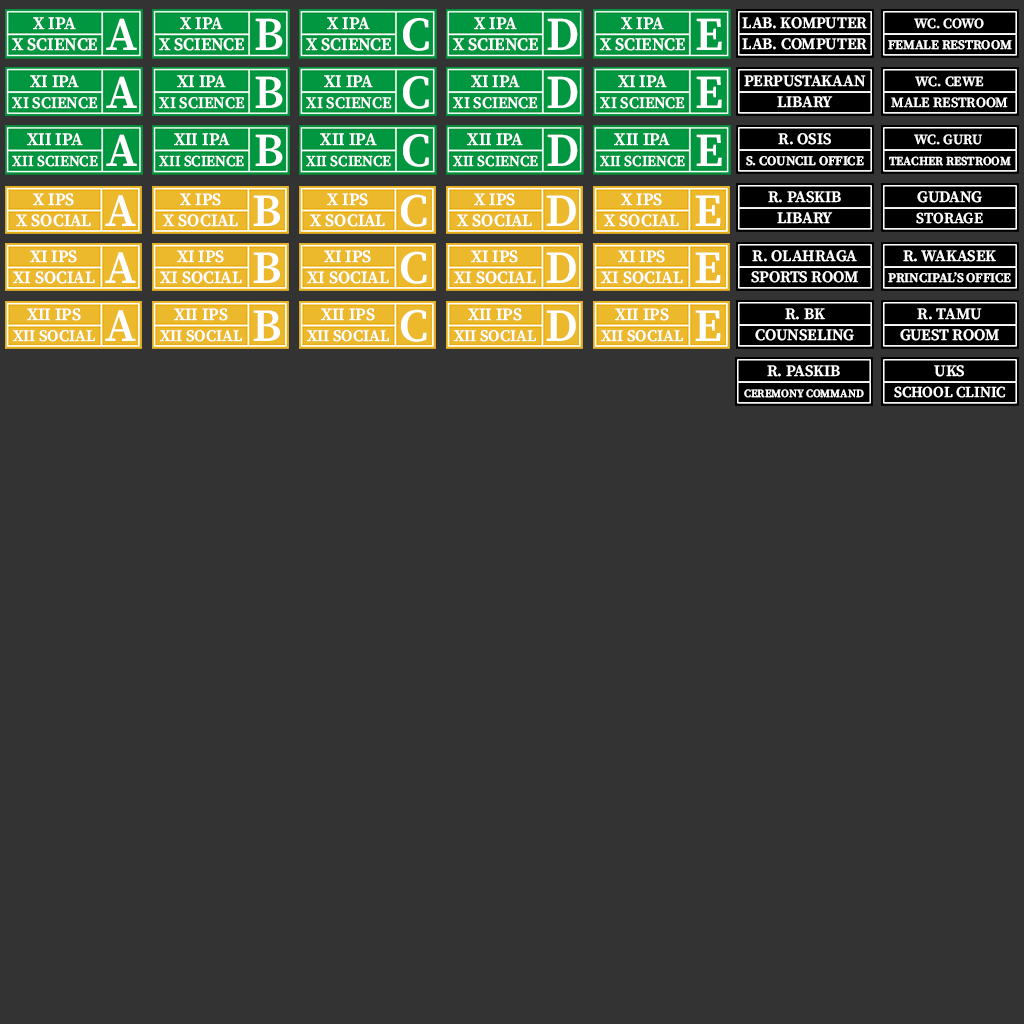
<style>
.page{position:relative;width:1024px;height:1024px;background:#333333}
.page>*{position:absolute;margin:0}
.t1{font:17.5px "SourceSerifRoman-Semibold";color:#ffffff}
.t2{font:15.9px "SourceSerifRoman-Semibold";color:#ffffff}
.t3{font:47px "SourceSerifRoman-Semibold";color:#ffffff}
.t4{font:14px "SourceSerifRoman-Semibold";color:#ffffff}
.t5{font:13px "SourceSerifRoman-Semibold";color:#ffffff}
.t6{font:16px "SourceSerifRoman-Semibold";color:#ffffff}
.t7{font:15px "SourceSerifRoman-Semibold";color:#ffffff}
.t8{font:12px "SourceSerifRoman-Semibold";color:#ffffff}
.t9{font:17.1px "SourceSerifRoman-Semibold";color:#ffffff}
.t10{font:46px "SourceSerifRoman-Semibold";color:#ffffff}
.t11{font:11px "SourceSerifRoman-Semibold";color:#ffffff}
</style>
<div class="page">
<p class="t1" style="left:33px;top:17px;width:43px;height:13px">X IPA</p>
<p class="t1" style="left:180px;top:17px;width:43px;height:13px">X IPA</p>
<p class="t1" style="left:327px;top:17px;width:43px;height:13px">X IPA</p>
<p class="t1" style="left:474px;top:17px;width:43px;height:13px">X IPA</p>
<p class="t1" style="left:621px;top:17px;width:43px;height:13px">X IPA</p>
<p class="t2" style="left:742px;top:17px;width:125px;height:12px">LAB. KOMPUTER</p>
<p class="t3" style="left:106px;top:18px;width:31px;height:32px">A</p>
<p class="t3" style="left:255px;top:18px;width:28px;height:32px">B</p>
<p class="t3" style="left:403px;top:18px;width:26px;height:33px">C</p>
<p class="t3" style="left:547px;top:18px;width:31px;height:32px">D</p>
<p class="t3" style="left:696px;top:18px;width:26px;height:32px">E</p>
<p class="t4" style="left:914px;top:18px;width:70px;height:11px">WC. COWO</p>
<p class="t1" style="left:12px;top:38px;width:85px;height:13px">X SCIENCE</p>
<p class="t1" style="left:159px;top:38px;width:85px;height:13px">X SCIENCE</p>
<p class="t1" style="left:306px;top:38px;width:85px;height:13px">X SCIENCE</p>
<p class="t1" style="left:453px;top:38px;width:85px;height:13px">X SCIENCE</p>
<p class="t1" style="left:600px;top:38px;width:85px;height:13px">X SCIENCE</p>
<p class="t2" style="left:742px;top:38px;width:125px;height:12px">LAB. COMPUTER</p>
<p class="t5" style="left:888px;top:40px;width:124px;height:10px">FEMALE RESTROOM</p>
<p class="t1" style="left:30px;top:75px;width:49px;height:13px">XI IPA</p>
<p class="t3" style="left:106px;top:76px;width:31px;height:32px">A</p>
<p class="t1" style="left:177px;top:75px;width:49px;height:13px">XI IPA</p>
<p class="t3" style="left:255px;top:76px;width:28px;height:32px">B</p>
<p class="t1" style="left:324px;top:75px;width:49px;height:13px">XI IPA</p>
<p class="t3" style="left:403px;top:76px;width:26px;height:33px">C</p>
<p class="t1" style="left:471px;top:75px;width:49px;height:13px">XI IPA</p>
<p class="t3" style="left:547px;top:76px;width:31px;height:32px">D</p>
<p class="t1" style="left:618px;top:75px;width:49px;height:13px">XI IPA</p>
<p class="t3" style="left:696px;top:76px;width:26px;height:32px">E</p>
<p class="t2" style="left:744px;top:75px;width:122px;height:12px">PERPUSTAKAAN</p>
<p class="t4" style="left:915px;top:76px;width:69px;height:11px">WC. CEWE</p>
<p class="t6" style="left:12px;top:97px;width:86px;height:12px">XI SCIENCE</p>
<p class="t6" style="left:159px;top:97px;width:86px;height:12px">XI SCIENCE</p>
<p class="t6" style="left:306px;top:97px;width:86px;height:12px">XI SCIENCE</p>
<p class="t6" style="left:453px;top:97px;width:85px;height:12px">XI SCIENCE</p>
<p class="t6" style="left:600px;top:97px;width:85px;height:12px">XI SCIENCE</p>
<p class="t2" style="left:777px;top:96px;width:56px;height:12px">LIBARY</p>
<p class="t4" style="left:891px;top:97px;width:117px;height:11px">MALE RESTROOM</p>
<p class="t1" style="left:27px;top:133px;width:56px;height:13px">XII IPA</p>
<p class="t3" style="left:106px;top:134px;width:31px;height:32px">A</p>
<p class="t1" style="left:174px;top:133px;width:56px;height:13px">XII IPA</p>
<p class="t3" style="left:255px;top:134px;width:28px;height:32px">B</p>
<p class="t1" style="left:320px;top:133px;width:57px;height:13px">XII IPA</p>
<p class="t3" style="left:403px;top:134px;width:26px;height:33px">C</p>
<p class="t1" style="left:467px;top:133px;width:56px;height:13px">XII IPA</p>
<p class="t3" style="left:547px;top:134px;width:31px;height:32px">D</p>
<p class="t1" style="left:614px;top:133px;width:56px;height:13px">XII IPA</p>
<p class="t3" style="left:696px;top:134px;width:26px;height:32px">E</p>
<p class="t2" style="left:778px;top:133px;width:53px;height:12px">R. OSIS</p>
<p class="t4" style="left:914px;top:134px;width:68px;height:11px">WC. GURU</p>
<p class="t7" style="left:12px;top:155px;width:86px;height:12px">XII SCIENCE</p>
<p class="t7" style="left:159px;top:155px;width:85px;height:12px">XII SCIENCE</p>
<p class="t7" style="left:306px;top:155px;width:85px;height:12px">XII SCIENCE</p>
<p class="t7" style="left:453px;top:155px;width:85px;height:12px">XII SCIENCE</p>
<p class="t7" style="left:600px;top:155px;width:85px;height:12px">XII SCIENCE</p>
<p class="t5" style="left:746px;top:156px;width:118px;height:10px">S. COUNCIL OFFICE</p>
<p class="t8" style="left:889px;top:156px;width:122px;height:10px">TEACHER RESTROOM</p>
<p class="t9" style="left:33px;top:193px;width:41px;height:13px">X IPS</p>
<p class="t10" style="left:105px;top:195px;width:31px;height:31px">A</p>
<p class="t9" style="left:180px;top:193px;width:41px;height:13px">X IPS</p>
<p class="t10" style="left:253px;top:195px;width:27px;height:31px">B</p>
<p class="t9" style="left:327px;top:193px;width:41px;height:13px">X IPS</p>
<p class="t10" style="left:401px;top:194px;width:26px;height:33px">C</p>
<p class="t9" style="left:474px;top:193px;width:41px;height:13px">X IPS</p>
<p class="t10" style="left:546px;top:195px;width:30px;height:31px">D</p>
<p class="t9" style="left:621px;top:193px;width:41px;height:13px">X IPS</p>
<p class="t10" style="left:695px;top:195px;width:26px;height:31px">E</p>
<p class="t2" style="left:768px;top:191px;width:73px;height:12px">R. PASKIB</p>
<p class="t2" style="left:917px;top:191px;width:65px;height:12px">GUDANG</p>
<p class="t9" style="left:16px;top:214px;width:75px;height:13px">X SOCIAL</p>
<p class="t9" style="left:163px;top:214px;width:75px;height:13px">X SOCIAL</p>
<p class="t9" style="left:310px;top:214px;width:75px;height:13px">X SOCIAL</p>
<p class="t9" style="left:457px;top:214px;width:75px;height:13px">X SOCIAL</p>
<p class="t9" style="left:604px;top:214px;width:75px;height:13px">X SOCIAL</p>
<p class="t2" style="left:777px;top:212px;width:56px;height:12px">LIBARY</p>
<p class="t7" style="left:916px;top:212px;width:67px;height:12px">STORAGE</p>
<p class="t9" style="left:30px;top:250px;width:47px;height:13px">XI IPS</p>
<p class="t10" style="left:105px;top:252px;width:31px;height:31px">A</p>
<p class="t9" style="left:177px;top:250px;width:47px;height:13px">XI IPS</p>
<p class="t10" style="left:253px;top:252px;width:27px;height:31px">B</p>
<p class="t9" style="left:324px;top:250px;width:47px;height:13px">XI IPS</p>
<p class="t10" style="left:401px;top:251px;width:26px;height:33px">C</p>
<p class="t9" style="left:471px;top:250px;width:47px;height:13px">XI IPS</p>
<p class="t10" style="left:546px;top:252px;width:30px;height:31px">D</p>
<p class="t9" style="left:618px;top:250px;width:47px;height:13px">XI IPS</p>
<p class="t10" style="left:695px;top:252px;width:26px;height:31px">E</p>
<p class="t2" style="left:752px;top:250px;width:105px;height:12px">R. OLAHRAGA</p>
<p class="t2" style="left:903px;top:250px;width:93px;height:12px">R. WAKASEK</p>
<p class="t9" style="left:13px;top:271px;width:82px;height:13px">XI SOCIAL</p>
<p class="t9" style="left:160px;top:271px;width:82px;height:13px">XI SOCIAL</p>
<p class="t9" style="left:307px;top:271px;width:82px;height:13px">XI SOCIAL</p>
<p class="t9" style="left:454px;top:271px;width:82px;height:13px">XI SOCIAL</p>
<p class="t9" style="left:601px;top:271px;width:82px;height:13px">XI SOCIAL</p>
<p class="t2" style="left:751px;top:271px;width:107px;height:12px">SPORTS ROOM</p>
<p class="t5" style="left:888px;top:272px;width:123px;height:11px">PRINCIPAL’S OFFICE</p>
<p class="t9" style="left:27px;top:308px;width:54px;height:13px">XII IPS</p>
<p class="t10" style="left:105px;top:310px;width:31px;height:31px">A</p>
<p class="t9" style="left:174px;top:308px;width:54px;height:13px">XII IPS</p>
<p class="t10" style="left:253px;top:310px;width:27px;height:31px">B</p>
<p class="t9" style="left:321px;top:308px;width:54px;height:13px">XII IPS</p>
<p class="t10" style="left:401px;top:309px;width:26px;height:33px">C</p>
<p class="t9" style="left:468px;top:308px;width:54px;height:13px">XII IPS</p>
<p class="t10" style="left:546px;top:310px;width:30px;height:31px">D</p>
<p class="t9" style="left:615px;top:308px;width:54px;height:13px">XII IPS</p>
<p class="t10" style="left:695px;top:310px;width:26px;height:31px">E</p>
<p class="t2" style="left:785px;top:308px;width:40px;height:12px">R. BK</p>
<p class="t2" style="left:917px;top:308px;width:65px;height:12px">R. TAMU</p>
<p class="t2" style="left:755px;top:329px;width:99px;height:12px">COUNSELING</p>
<p class="t2" style="left:900px;top:329px;width:99px;height:12px">GUEST ROOM</p>
<p class="t6" style="left:13px;top:330px;width:82px;height:12px">XII SOCIAL</p>
<p class="t6" style="left:160px;top:330px;width:82px;height:12px">XII SOCIAL</p>
<p class="t6" style="left:307px;top:330px;width:82px;height:12px">XII SOCIAL</p>
<p class="t6" style="left:454px;top:330px;width:82px;height:12px">XII SOCIAL</p>
<p class="t6" style="left:601px;top:330px;width:82px;height:12px">XII SOCIAL</p>
<p class="t2" style="left:767px;top:365px;width:73px;height:12px">R. PASKIB</p>
<p class="t2" style="left:934px;top:365px;width:30px;height:12px">UKS</p>
<p class="t11" style="left:744px;top:389px;width:120px;height:9px">CEREMONY COMMAND</p>
<p class="t7" style="left:894px;top:386px;width:112px;height:12px">SCHOOL CLINIC</p>
</div>
